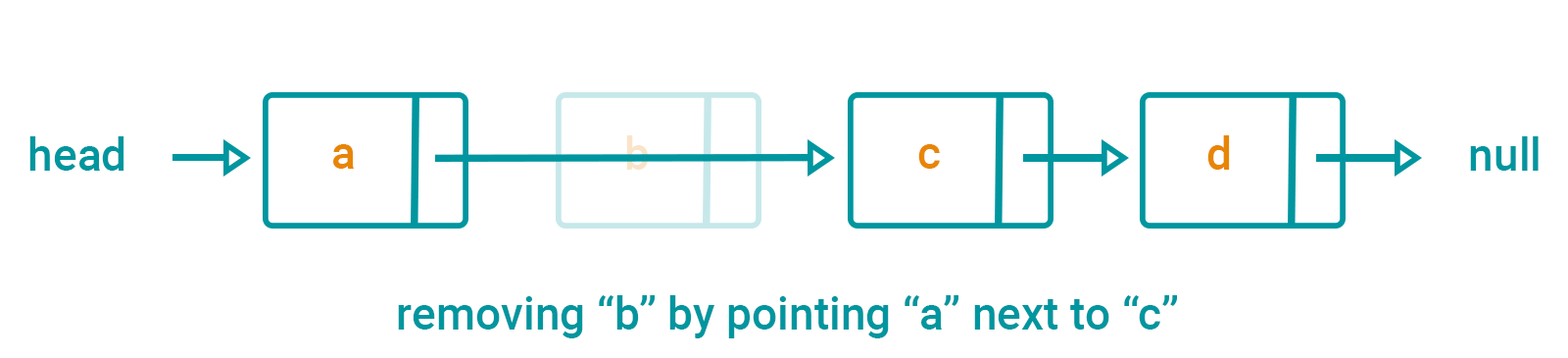
<style>
.page{position:relative;width:1568px;height:358px;background:#ffffff}
.page>*{position:absolute;margin:0}
.t1{font:45.2px "Roboto-Medium";color:#00969f}
.t2{font:45.2px "Roboto-Medium";color:#fae4c8}
.t3{font:45.2px "Roboto-Medium";color:#e88504}
</style>
<div class="page">
<p class="t1" style="left:29px;top:136px;width:95px;height:35px">head</p>
<p class="t2" style="left:626px;top:135px;width:23px;height:35px">b</p>
<p class="t3" style="left:1207px;top:135px;width:23px;height:35px">d</p>
<p class="t1" style="left:1470px;top:136px;width:69px;height:35px">null</p>
<p class="t3" style="left:333px;top:144px;width:21px;height:25px">a</p>
<p class="t3" style="left:918px;top:144px;width:22px;height:25px">c</p>
<p class="t1" style="left:398px;top:295px;width:779px;height:43px">removing “b” by pointing “a” next to “c”</p>
</div>
